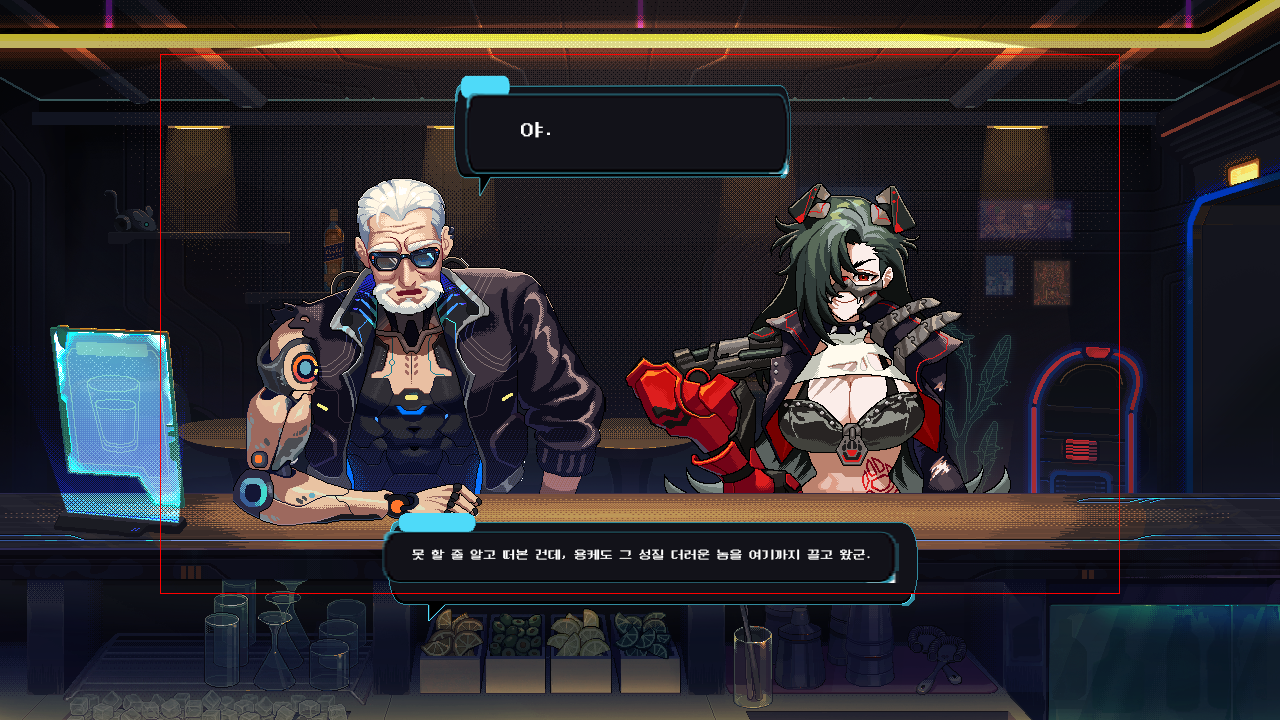
<style>
.page{position:relative;width:1280px;height:720px}
.page>*{position:absolute;margin:0}
.t1{font:18.7px "NeoDunggeunmo-Regular";color:#ffffff;scale:1.25 1}
.t2{font:12px "NeoDunggeunmo-Regular";color:#ffffff;scale:1.08 1}
</style>
<div class="page">
<p class="t1" style="left:521px;top:122px;width:29px;height:16px">야.</p>
<p class="t2" style="left:412px;top:549px;width:458px;height:11px">못 할 줄 알고 떠본 건데, 용케도 그 성질 더러운 놈을 여기까지 끌고 왔군.</p>
</div>
